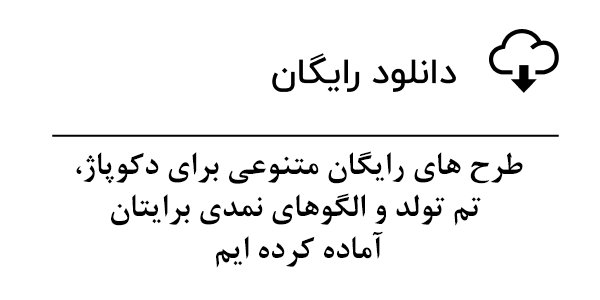
<style>
.page{position:relative;width:600px;height:300px;background:#ffffff}
.page>*{position:absolute;margin:0}
.t1{font:35px "BNazaninBold";color:#000000}
</style>
<div class="page">
<p class="t1" style="left:76px;top:151px;width:447px;height:117px;text-align:center">،طرح های رایگان متنوعی برای دکوپاژ<br>تم تولد و الگوهای نمدی برایتان <br>آماده کرده ایم</p>
</div>
